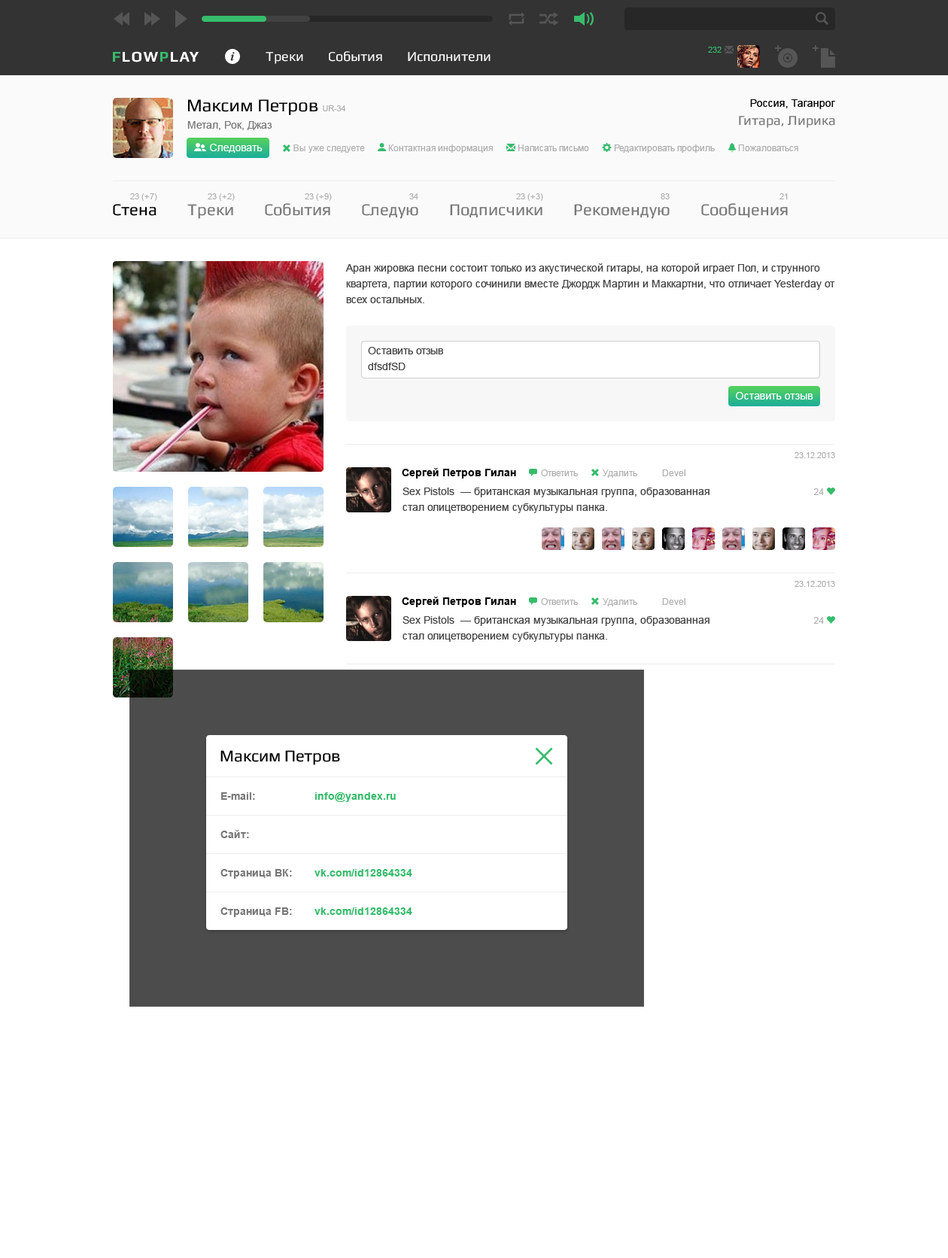
<style>
.page{position:relative;width:948px;height:1258px;background:#ffffff}
.page>*{position:absolute;margin:0}
.t1{font:18.1px "Play";color:#000000}
.t2{font:8.3px "ArialMT";color:#afafaf}
.t3{font:10.5px "ArialMT";color:#000000}
.t4{font:10.5px "ArialMT";color:#777777}
.t5{font:13.5px "Play";color:#777777}
.t6{font:10.5px "ArialMT";color:#ffffff}
.t7{font:9px "ArialMT";color:#afafaf}
.t8{font:16.6px "Play";color:#777777}
.t9{font:16.6px "Play";color:#000000}
.t10{font:10.5px/15.8px "ArialMT";color:#444444}
.t11{font:10.5px "Arial-BoldMT";color:#000000}
.t12{font:10.5px/38.4px "Arial-BoldMT";color:#777777}
.t13{font:10.5px/38.4px "Arial-BoldMT";color:#37bc6c}
</style>
<div class="page">
<p class="t1" style="left:188px;top:99px;width:158px;height:16px">Максим Петров <span class="t2">UR-34</span></p>
<p class="t3" style="left:750px;top:99px;width:85px;height:10px">Россия, Таганрог</p>
<p class="t4" style="left:187px;top:121px;width:85px;height:9px">Метал, Рок, Джаз</p>
<p class="t5" style="left:739px;top:116px;width:96px;height:12px">Гитара, Лирика</p>
<p class="t6" style="left:210px;top:144px;width:53px;height:9px">Следовать</p>
<p class="t7" style="left:293px;top:144px;width:72px;height:9px">Вы уже следуете</p>
<p class="t7" style="left:388px;top:144px;width:327px;height:9px">Контактная информация           Написать письмо           Редактировать профиль</p>
<p class="t7" style="left:738px;top:144px;width:60px;height:7px">Пожаловаться</p>
<p class="t2" style="left:130px;top:193px;width:27px;height:8px">23 (+ 7)</p>
<p class="t2" style="left:208px;top:193px;width:27px;height:8px">23 (+ 2)</p>
<p class="t2" style="left:305px;top:193px;width:27px;height:8px">23 (+ 9)</p>
<p class="t2" style="left:409px;top:193px;width:9px;height:6px">34</p>
<p class="t2" style="left:516px;top:193px;width:27px;height:8px">23 (+ 3)</p>
<p class="t2" style="left:661px;top:193px;width:9px;height:6px">83</p>
<p class="t2" style="left:779px;top:193px;width:9px;height:6px">21</p>
<p class="t8" style="left:113px;top:203px;width:675px;height:16px"><span class="t9">Стена        </span>Треки        События        Следую        Подписчики        Рекомендую        Сообщения</p>
<p class="t10" style="left:345px;top:263px;width:490px;height:40px">Аран жировка песни состоит только из акустической гитары, на которой играет Пол, и струнного квартета, партии которого сочинили вместе Джордж Мартин и Маккартни, что отличает Yesterday от всех остальных.</p>
<p class="t10" style="left:368px;top:347px;width:75px;height:23px">Оставить отзыв<br>dfsdfSD</p>
<p class="t6" style="left:736px;top:392px;width:77px;height:7px">Оставить отзыв</p>
<p class="t2" style="left:794px;top:452px;width:41px;height:6px">23.12.2013</p>
<p class="t7" style="left:402px;top:468px;width:283px;height:10px"><span class="t11">Сергей Петров Гилан           </span>Ответить           Удалить           Devel</p>
<p class="t10" style="left:403px;top:487px;width:306px;height:26px">Sex Pistols  — британская музыкальная группа, образованная<br>стал олицетворением субкультуры панка.</p>
<p class="t7" style="left:813px;top:488px;width:11px;height:7px">24</p>
<p class="t2" style="left:794px;top:581px;width:41px;height:6px">23.12.2013</p>
<p class="t7" style="left:402px;top:597px;width:283px;height:10px"><span class="t11">Сергей Петров Гилан           </span>Ответить           Удалить           Devel</p>
<p class="t10" style="left:403px;top:615px;width:306px;height:27px">Sex Pistols  — британская музыкальная группа, образованная<br>стал олицетворением субкультуры панка.</p>
<p class="t7" style="left:813px;top:617px;width:11px;height:7px">24</p>
<p class="t9" style="left:220px;top:750px;width:120px;height:15px">Максим Петров</p>
<p class="t12" style="left:220px;top:792px;width:72px;height:125px">E-mail: <br>Сайт:  <br>Страница ВК:  <br>Страница FB:</p>
<p class="t13" style="left:314px;top:792px;width:98px;height:123px">info@yandex.ru<br><br>vk.com/id12864334<br>vk.com/id12864334</p>
</div>
